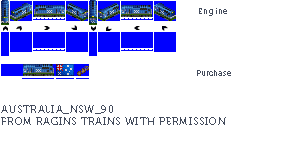
<style>
.page{position:relative;width:300px;height:159px;background:#ffffff}
.page>*{position:absolute;margin:0}
.t1{font:8px "Museo700-Regular";letter-spacing:0.075em;color:#444c5c}
.t2{font:8px "Museo700-Regular";color:#444c5c}
.t3{font:10px "Museo700-Regular";letter-spacing:0.075em;color:#444c5c;text-transform:uppercase}
</style>
<div class="page">
<p class="t1" style="left:199px;top:8px;width:28px;height:8px">Engine</p>
<p class="t2" style="left:197px;top:70px;width:34px;height:6px">Purchase</p>
<p class="t3" style="left:1px;top:105px;width:225px;height:20px">Australia_NSW_90<br>from ragins trains with permission</p>
</div>
